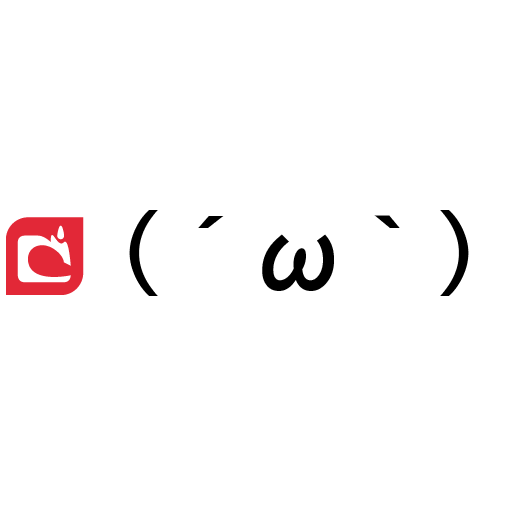
<style>
.page{position:relative;width:512px;height:512px;background:#ffffff}
.page>*{position:absolute;margin:0}
.t1{font:90px "BIZ-UDGothic-Bold";color:#000000}
</style>
<div class="page">
<p class="t1" style="left:129px;top:210px;width:340px;height:86px">(´ω｀)</p>
</div>
